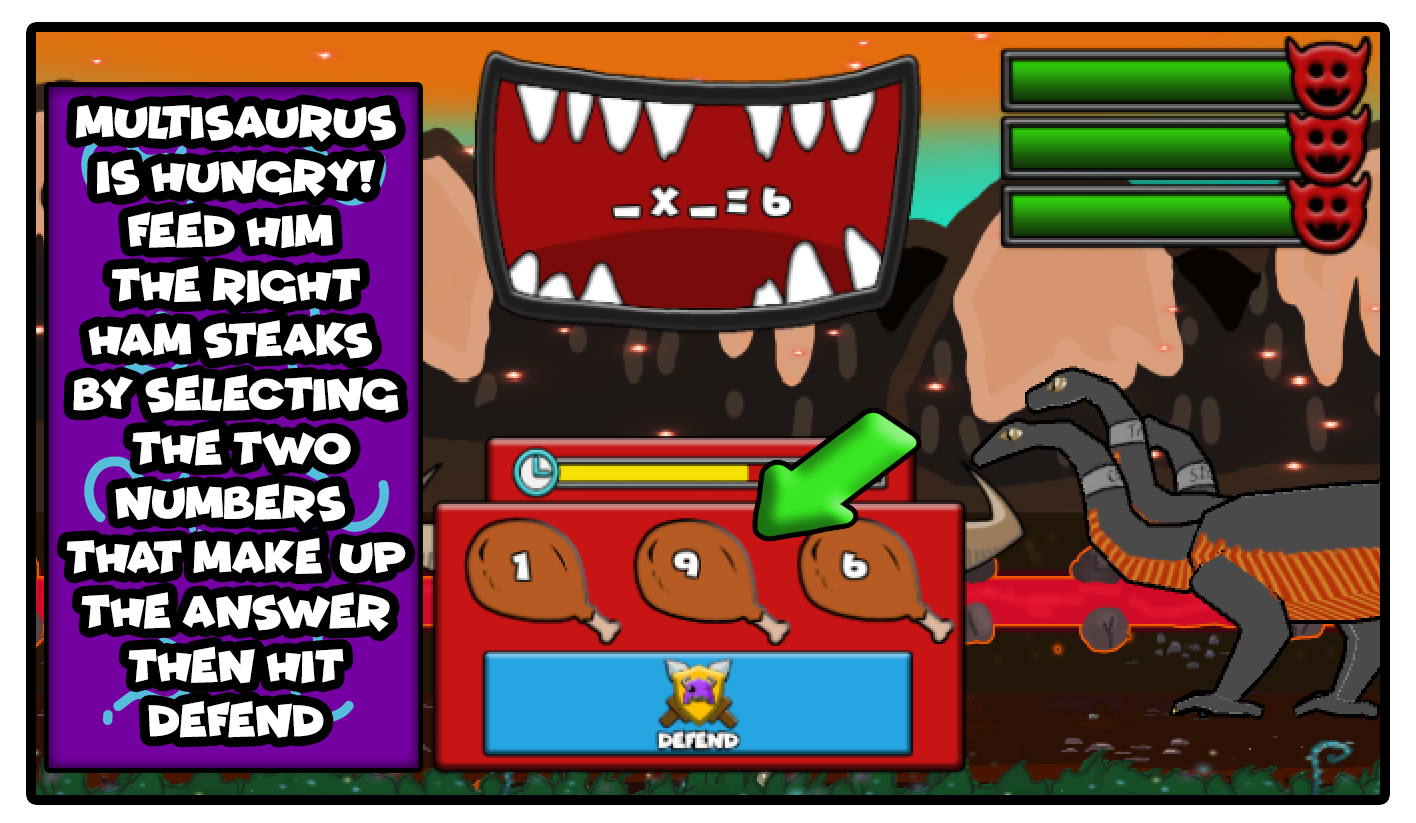
<style>
.page{position:relative;width:1416px;height:823px}
.page>*{position:absolute;margin:0}
.t1{font:45.3px "Funhouse";color:#ffffff}
</style>
<div class="page">
<p class="t1" style="left:66px;top:104px;width:340px;height:634px;text-align:center">multisaurus<br>is hungry!<br>feed him <br>the right<br>ham steaks <br>by selecting<br> the two<br>numbers <br>that make up<br>the answer<br>then hit<br>defend</p>
</div>
